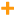
<style>
.page{position:relative;width:16px;height:16px;background:#ffffff}
.page>*{position:absolute;margin:0}
.t1{font:44.6px "Spinnaker-Regular";letter-spacing:0.15em;color:#ff990c;text-transform:uppercase;font-weight:bold}
</style>
<div class="page">
<p class="t1" style="left:1px;top:1px;width:13px;height:14px">+</p>
</div>
